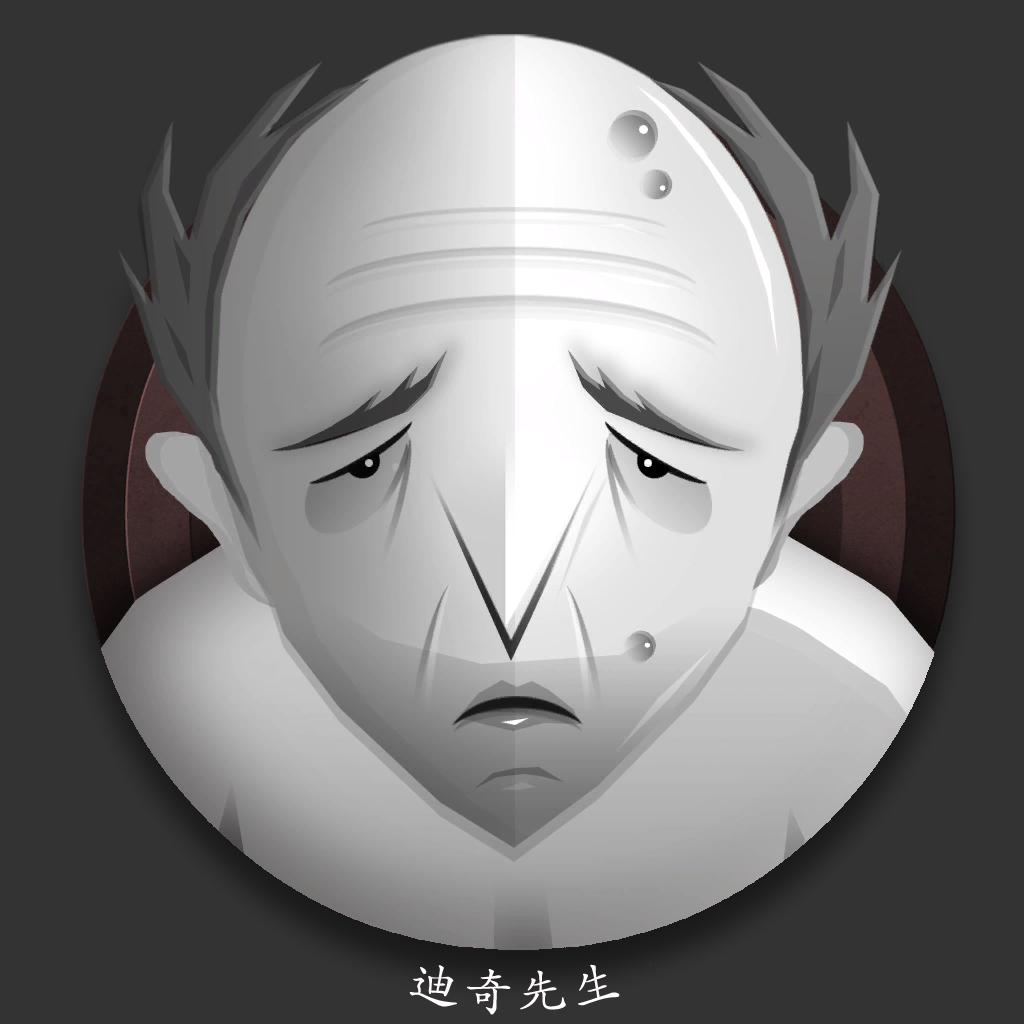
<style>
.page{position:relative;width:1024px;height:1024px;background:#333333}
.page>*{position:absolute;margin:0}
.t1{font:48px "STKaiti";letter-spacing:0.05em;color:#fffbff}
</style>
<div class="page">
<p class="t1" style="left:409px;top:964px;width:211px;height:51px">迪奇先生</p>
</div>
